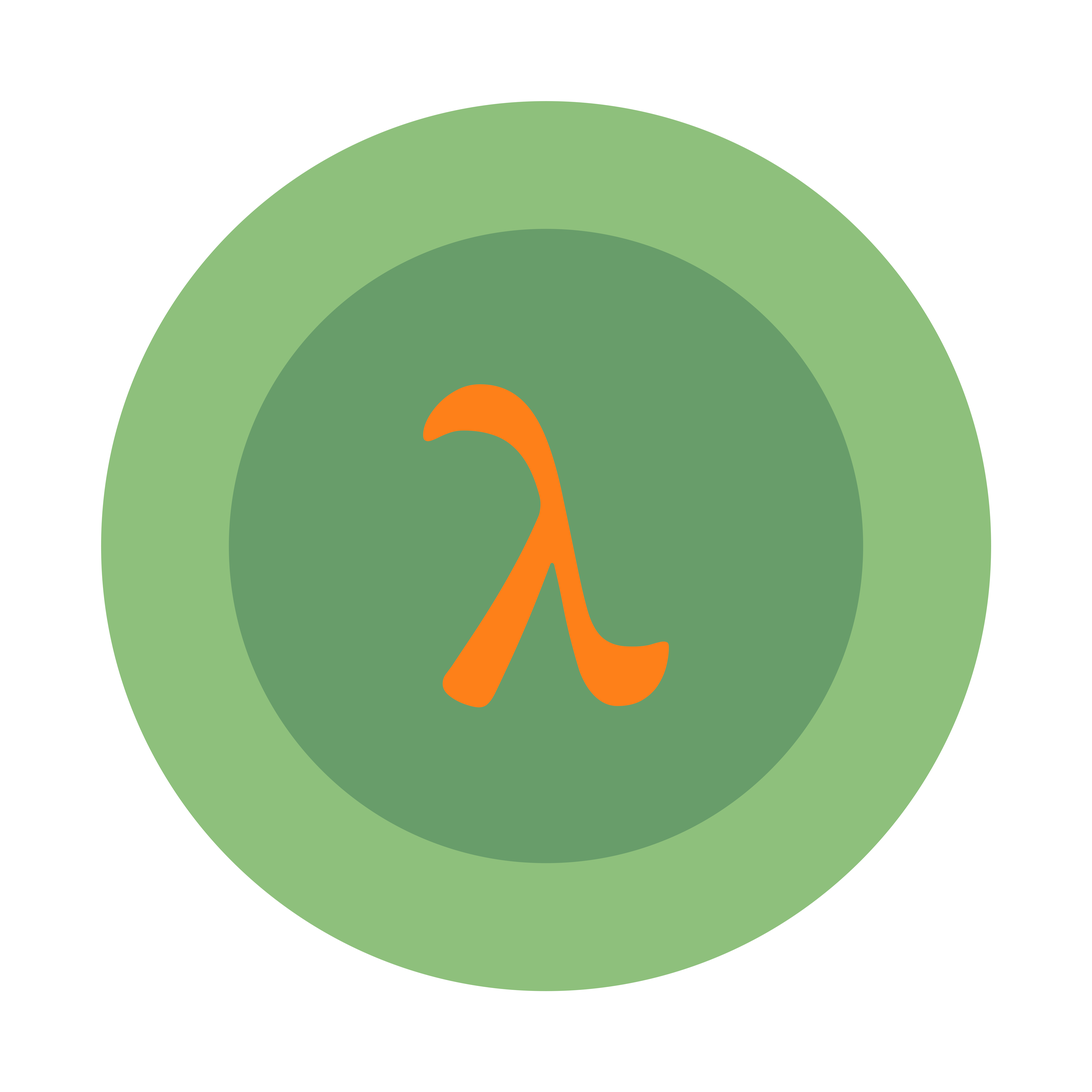
<style>
.page{position:relative;width:1092px;height:1092px;background:#ffffff}
.page>*{position:absolute;margin:0}
.t1{font:444.3px "EBGaramondRoman-Bold";color:#fe8019}
</style>
<div class="page">
<p class="t1" style="left:423px;top:384px;width:246px;height:323px">λ</p>
</div>
